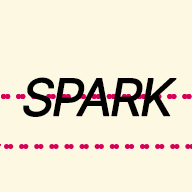
<style>
.page{position:relative;width:192px;height:192px;background:#fdf8e2}
.page>*{position:absolute;margin:0}
.t1{font:52.5px "Pretendard-Regular";letter-spacing:-0.05em;color:#000000;font-weight:bold;font-style:italic}
</style>
<div class="page">
<p class="t1" style="left:23px;top:77px;width:154px;height:40px">SPARK</p>
</div>
